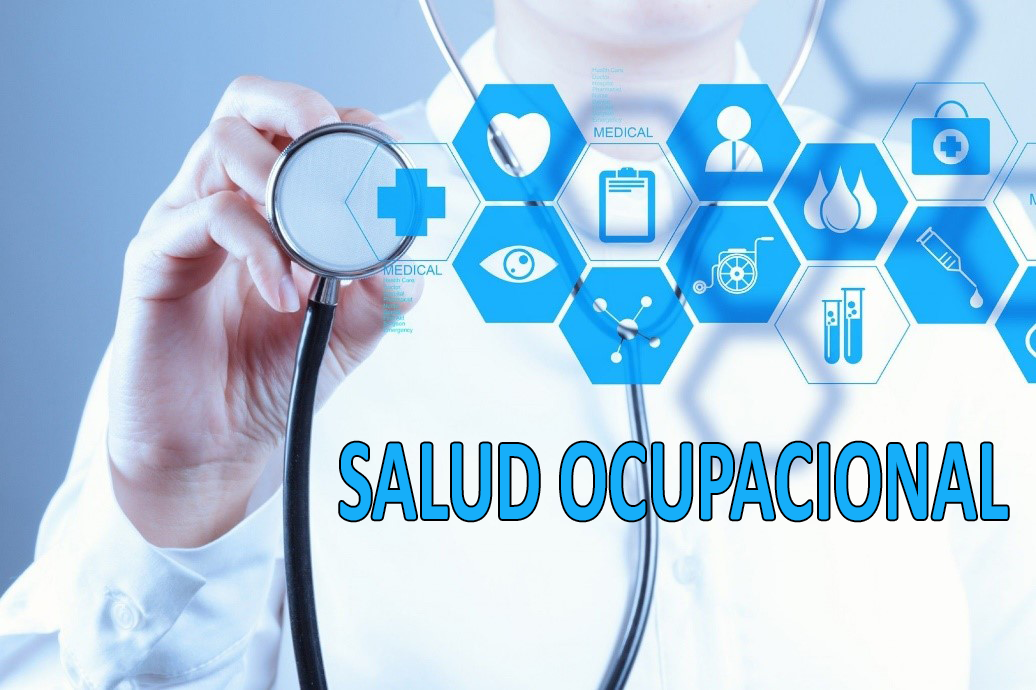
<style>
.page{position:relative;width:1036px;height:690px}
.page>*{position:absolute;margin:0}
.t1{font:118.8px "Calibri-Bold";color:#16aef9;scale:0.62 1}
</style>
<div class="page">
<p class="t1" style="left:340px;top:442px;width:668px;height:79px">SALUD OCUPACIONAL</p>
</div>
